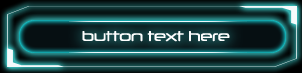
<style>
.page{position:relative;width:302px;height:73px}
.page>*{position:absolute;margin:0}
.t1{font:13.6px "Neuropol-Regular";color:#ffffff}
</style>
<div class="page">
<p class="t1" style="left:82px;top:31px;width:148px;height:11px">button text here</p>
</div>
